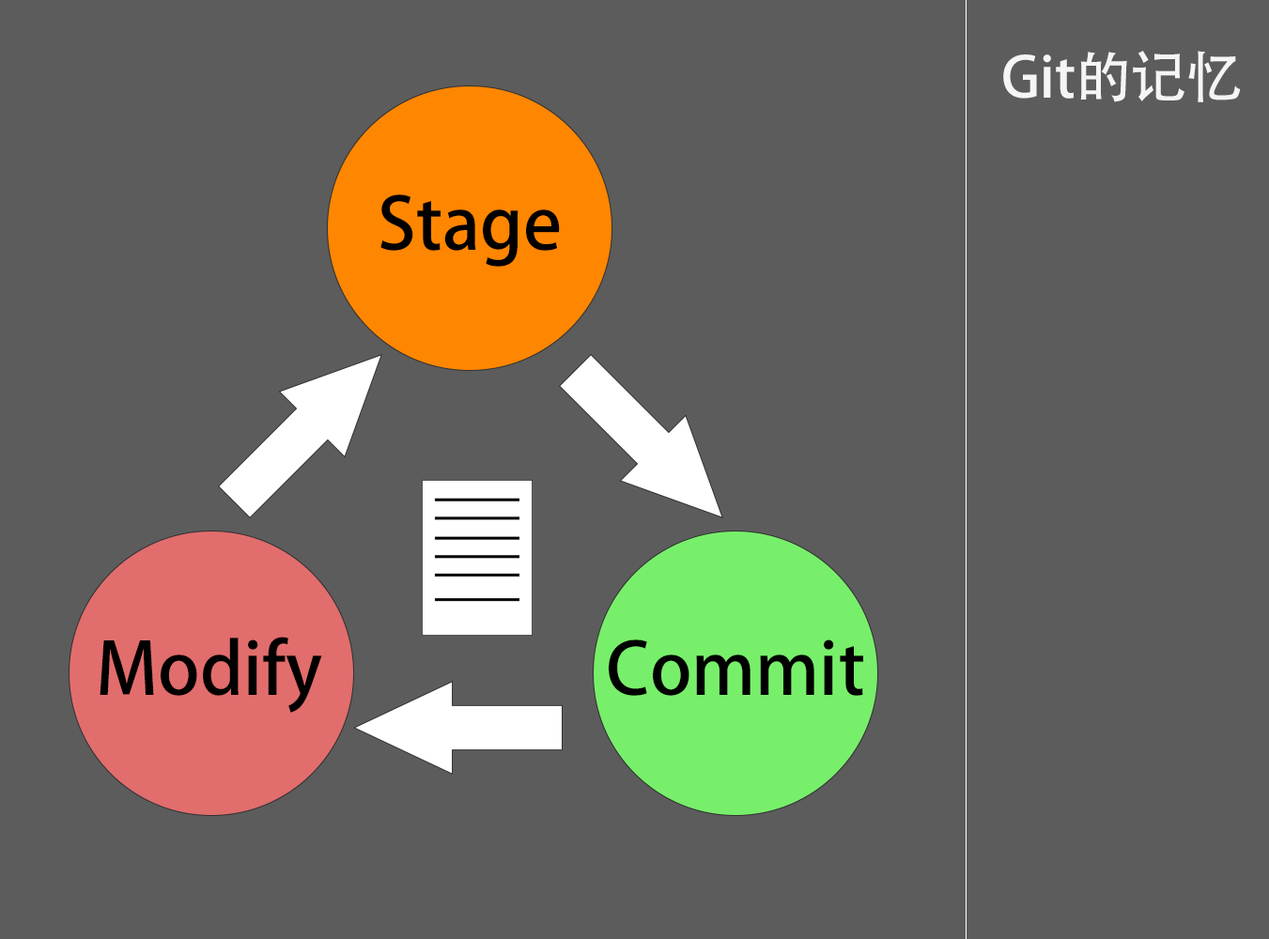
<style>
.page{position:relative;width:1269px;height:939px;background:#5c5c5c}
.page>*{position:absolute;margin:0}
.t1{font:55.8px "AdobeHeitiStd-Regular";color:#f5f5f5}
.t2{font:71.1px "AdobeHeitiStd-Regular";color:#000000}
</style>
<div class="page">
<p class="t1" style="left:1003px;top:51px;width:238px;height:51px">Git的记忆</p>
<p class="t2" style="left:380px;top:194px;width:180px;height:73px">Stage</p>
<p class="t2" style="left:100px;top:637px;width:222px;height:76px">Modify</p>
<p class="t2" style="left:609px;top:640px;width:254px;height:56px">Commit</p>
</div>
